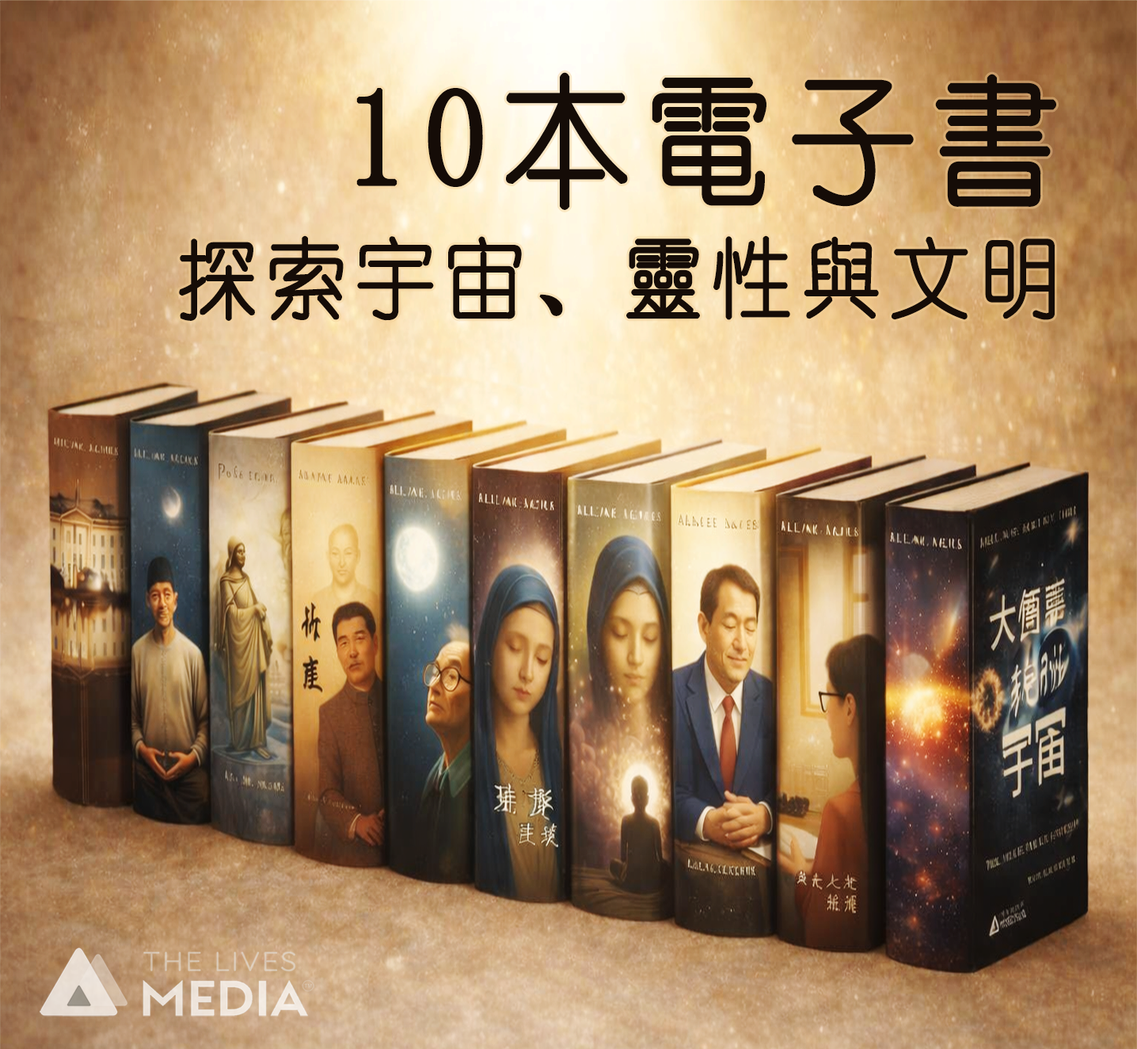
<style>
.page{position:relative;width:1137px;height:1049px}
.page>*{position:absolute;margin:0}
.t1{font:87.1px/120.4px "YouYuan";letter-spacing:0.1em;color:#150c07;font-weight:bold;scale:0.91 1}
.t2{font:139.4px/120.4px "YouYuan";letter-spacing:0.1em;color:#150c07;font-weight:bold;scale:0.91 1}
</style>
<div class="page">
<p class="t1" style="left:179px;top:72px;width:877px;height:249px;text-align:right"><span class="t2">10本電子書<br></span>探索宇宙、靈性與文明</p>
</div>
